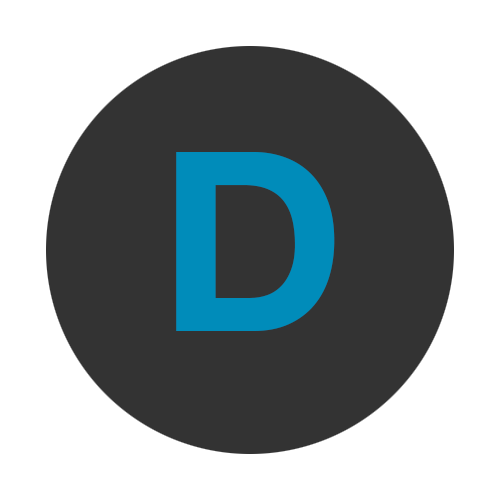
<style>
.page{position:relative;width:500px;height:500px;background:#ffffff}
.page>*{position:absolute;margin:0}
.t1{font:250px "HelveticaNeue-Bold";color:#008cba}
</style>
<div class="page">
<p class="t1" style="left:176px;top:152px;width:159px;height:179px">D</p>
</div>
